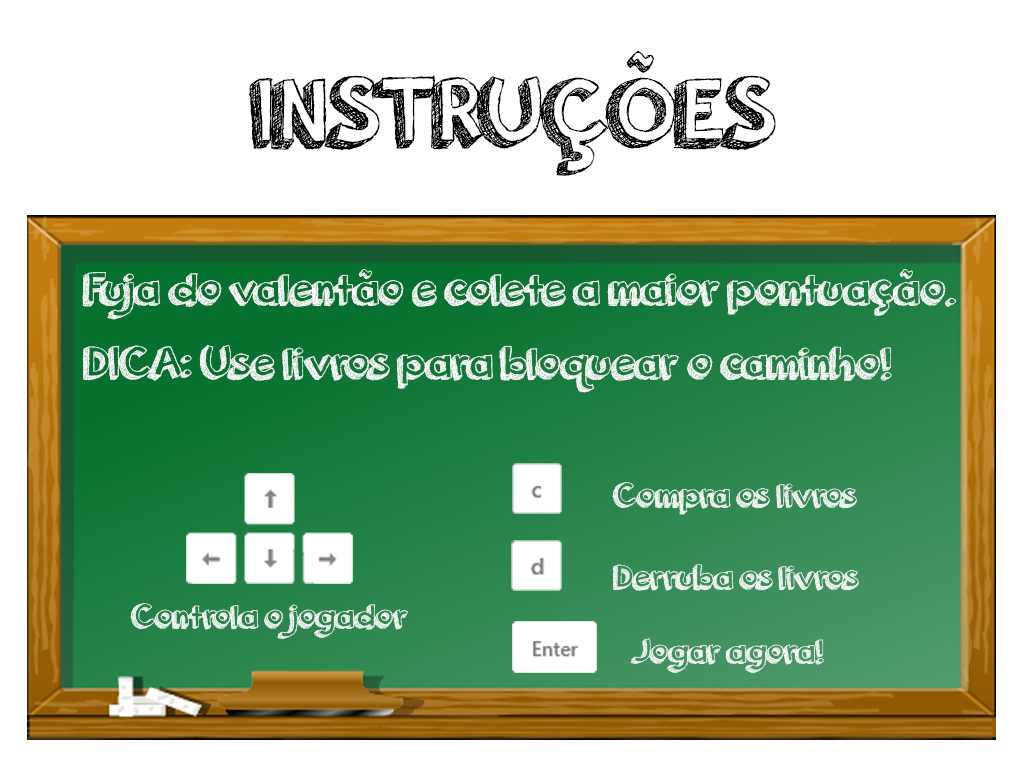
<style>
.page{position:relative;width:1024px;height:768px;background:#ffffff}
.page>*{position:absolute;margin:0}
.t1{font:100px "orangejuice";color:#000000}
.t2{font:48px "orangejuice";color:#ffffff}
.t3{font:36px "orangejuice";color:#ffffff}
</style>
<div class="page">
<p class="t1" style="left:249px;top:51px;width:527px;height:125px">INSTRUÇÕES</p>
<p class="t2" style="left:82px;top:269px;width:874px;height:124px">Fuja do valentão e colete a maior pontuação.<br><br>DICA: Use livros para bloquear o caminho!</p>
<p class="t3" style="left:612px;top:482px;width:245px;height:33px">Compra os livros</p>
<p class="t3" style="left:612px;top:564px;width:247px;height:27px">Derruba os livros</p>
<p class="t3" style="left:130px;top:603px;width:278px;height:36px">Controla o jogador</p>
<p class="t3" style="left:630px;top:638px;width:194px;height:35px">Jogar agora!</p>
</div>
